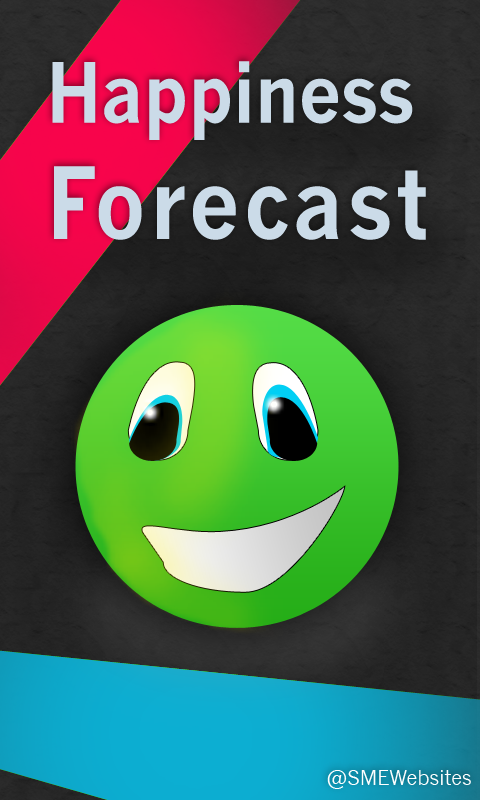
<style>
.page{position:relative;width:480px;height:800px}
.page>*{position:absolute;margin:0}
.t1{font:81px "NewsGothic-Bold";letter-spacing:-0.005em;color:#cbdbe8;scale:0.91 1}
.t2{font:96.8px "NewsGothic-Bold";letter-spacing:0.05em;color:#cbdbe8;scale:0.91 1}
.t3{font:20px "NewsGothic";color:#feffff}
</style>
<div class="page">
<p class="t1" style="left:52px;top:61px;width:374px;height:179px">Happiness<br><span class="t2">Forecast</span></p>
<p class="t3" style="left:327px;top:770px;width:144px;height:19px">@SMEWebsites</p>
</div>
